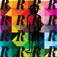
<style>
.page{position:relative;width:57px;height:57px}
.page>*{position:absolute;margin:0}
.t1{font:14.2px "BodoniBE-BoldCnItalic";color:#131313}
</style>
<div class="page">
<p class="t1" style="left:30px;top:26px;width:11px;height:12px">R</p>
</div>
